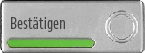
<style>
.page{position:relative;width:145px;height:53px}
.page>*{position:absolute;margin:0}
.t1{font:16px "Venn-CondensedRegular";color:#434343}
</style>
<div class="page">
<p class="t1" style="left:11px;top:17px;width:54px;height:15px">Bestätigen</p>
</div>
